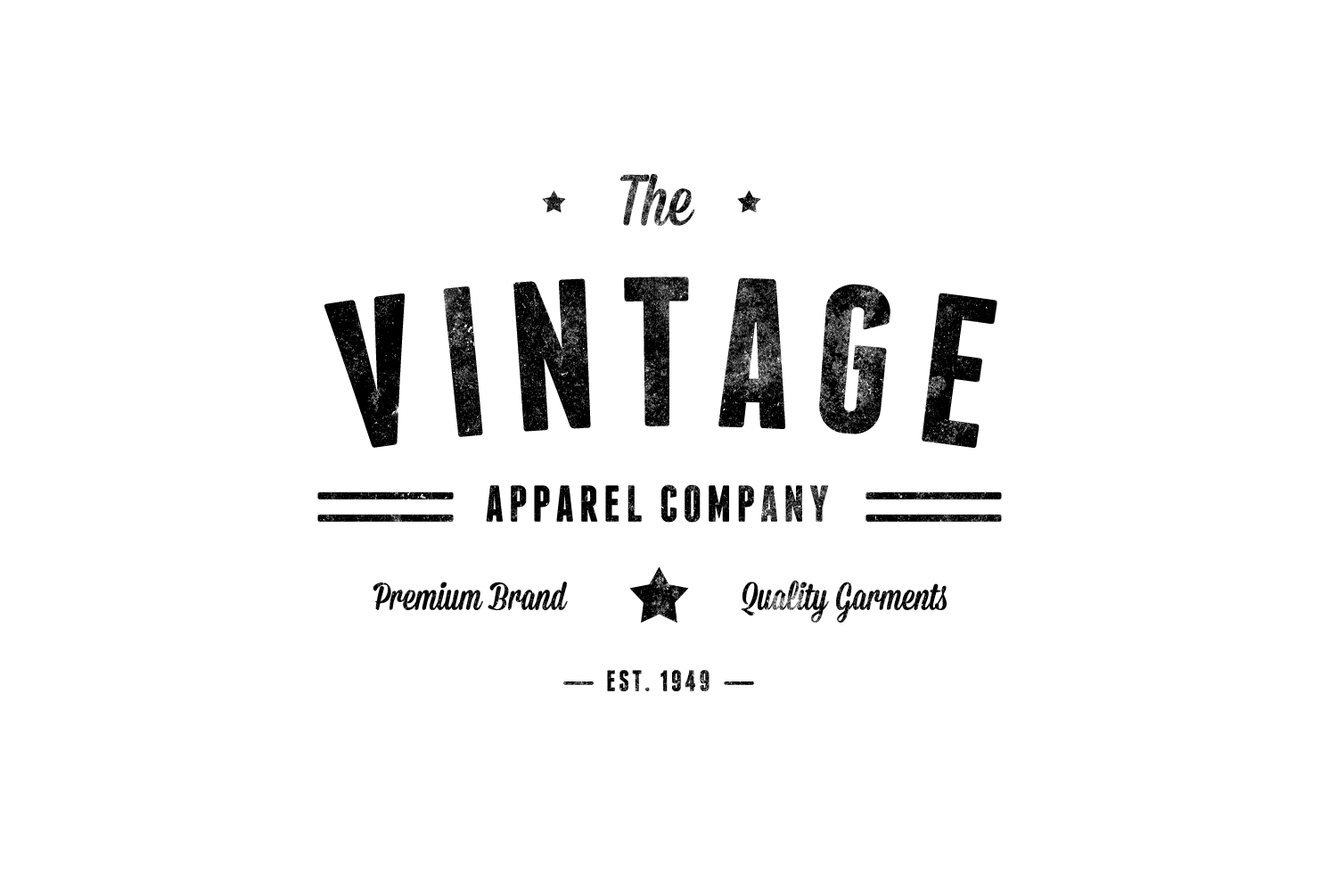
<style>
.page{position:relative;width:1337px;height:892px;background:#ffffff}
.page>*{position:absolute;margin:0}
.t1{font:71.5px "Mission-Script"}
.t2{font:210.8px "Franchise-Bold";letter-spacing:0.1em;color:#000000;text-transform:uppercase}
.t3{font:51.4px "Franchise-Bold";letter-spacing:0.1em;color:#000000;text-transform:uppercase}
.t4{font:38.8px "Mission-Script";color:#000000}
.t5{font:29.4px "Franchise-Bold";letter-spacing:0.1em;text-transform:uppercase}
</style>
<div class="page">
<p class="t1" style="left:621px;top:174px;width:74px;height:52px">The</p>
<p class="t2" style="left:325px;top:276px;width:673px;height:172px">VINTAGE</p>
<p class="t3" style="left:486px;top:484px;width:343px;height:38px">apparel company</p>
<p class="t4" style="left:373px;top:581px;width:195px;height:29px">Premium Brand</p>
<p class="t4" style="left:741px;top:580px;width:206px;height:42px">Quality Garments</p>
<p class="t5" style="left:607px;top:670px;width:103px;height:21px">Est. 1949</p>
</div>
